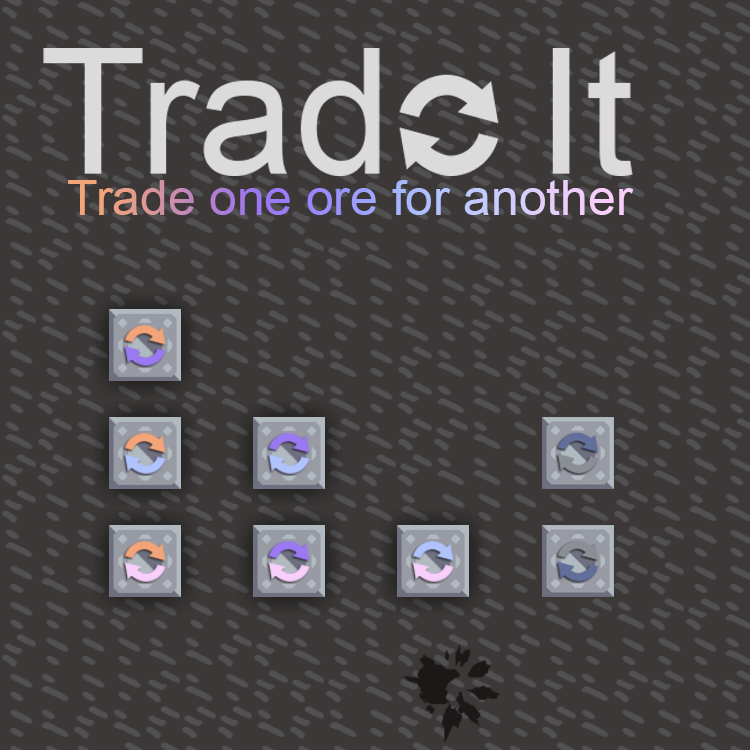
<style>
.page{position:relative;width:750px;height:750px;background:#3c3838}
.page>*{position:absolute;margin:0}
.t1{font:49.2px "ArialMT"}
</style>
<div class="page">
<p class="t1" style="left:68px;top:180px;width:566px;height:35px">Trade one ore for another</p>
</div>
